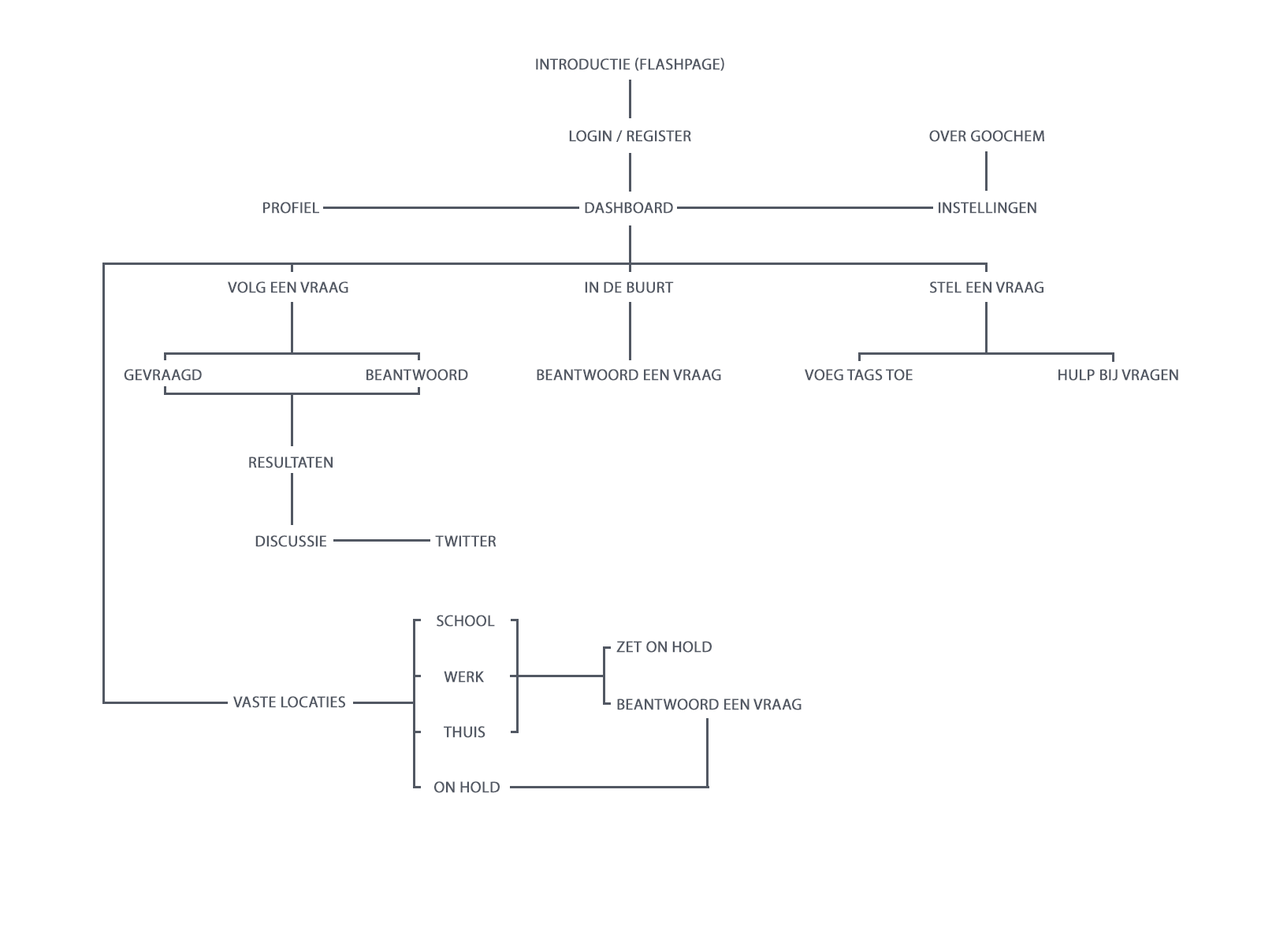
<style>
.page{position:relative;width:1261px;height:946px;background:#ffffff}
.page>*{position:absolute;margin:0}
.t1{font:15.8px "MyriadPro-Regular";color:#525863;text-transform:uppercase;font-weight:bold}
</style>
<div class="page">
<p class="t1" style="left:536px;top:58px;width:188px;height:13px">Introductie (flashpage)</p>
<p class="t1" style="left:569px;top:130px;width:122px;height:12px">Login / Register</p>
<p class="t1" style="left:929px;top:130px;width:115px;height:12px">Over goochem</p>
<p class="t1" style="left:263px;top:202px;width:56px;height:12px">Profiel</p>
<p class="t1" style="left:585px;top:202px;width:88px;height:12px">Dashboard</p>
<p class="t1" style="left:939px;top:202px;width:97px;height:12px">Instellingen</p>
<p class="t1" style="left:228px;top:281px;width:120px;height:12px">volg een vraag</p>
<p class="t1" style="left:585px;top:281px;width:89px;height:12px">In de buurt</p>
<p class="t1" style="left:930px;top:281px;width:113px;height:12px">Stel een vraag</p>
<p class="t1" style="left:124px;top:369px;width:78px;height:12px">Gevraagd</p>
<p class="t1" style="left:366px;top:369px;width:102px;height:12px">Beantwoord</p>
<p class="t1" style="left:537px;top:369px;width:184px;height:12px">Beantwoord een vraag</p>
<p class="t1" style="left:805px;top:369px;width:108px;height:12px">Voeg tags toe</p>
<p class="t1" style="left:1058px;top:369px;width:120px;height:12px">Hulp bij vragen</p>
<p class="t1" style="left:249px;top:456px;width:84px;height:12px">Resultaten</p>
<p class="t1" style="left:255px;top:535px;width:71px;height:12px">Discussie</p>
<p class="t1" style="left:435px;top:535px;width:61px;height:12px">Twitter</p>
<p class="t1" style="left:437px;top:615px;width:58px;height:12px">School</p>
<p class="t1" style="left:616px;top:641px;width:96px;height:12px">zet on hold</p>
<p class="t1" style="left:444px;top:671px;width:40px;height:11px">Werk</p>
<p class="t1" style="left:233px;top:696px;width:112px;height:12px">Vaste locaties</p>
<p class="t1" style="left:617px;top:698px;width:184px;height:12px">Beantwoord een vraag</p>
<p class="t1" style="left:444px;top:726px;width:41px;height:12px">Thuis</p>
<p class="t1" style="left:434px;top:781px;width:66px;height:12px">On hold</p>
</div>
